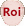
<style>
.page{position:relative;width:25px;height:26px}
.page>*{position:absolute;margin:0}
.t1{font:12px "LaoUI-Bold";color:#a5000c}
</style>
<div class="page">
<p class="t1" style="left:3px;top:7px;width:18px;height:9px">Roi</p>
</div>
